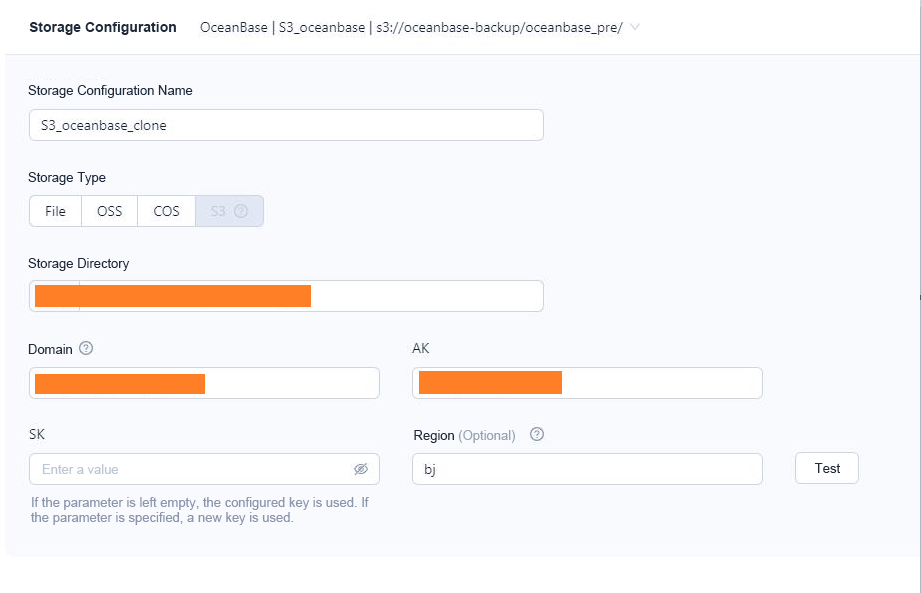
<style>
.page{position:relative;width:921px;height:593px;background:#f9fafe}
.page>*{position:absolute;margin:0}
.t1{font:14px "Arial-BoldMT";color:#1d2a3b}
.t2{font:13px "ArialMT";color:#1d2a3b}
.t3{font:13px "ArialMT";color:#95a4b5}
.t4{font:13px "ArialMT";color:#bcc6d6}
.t5{font:13px/15px "ArialMT";color:#8b95ac}
</style>
<div class="page">
<p class="t1" style="left:29px;top:22px;width:147px;height:13px">Storage Configuration</p>
<p class="t2" style="left:28px;top:85px;width:165px;height:13px">Storage Configuration Name</p>
<p class="t2" style="left:28px;top:172px;width:78px;height:13px">Storage Type</p>
<p class="t2" style="left:28px;top:258px;width:102px;height:13px">Storage Directory</p>
<p class="t2" style="left:28px;top:344px;width:44px;height:10px">Domain</p>
<p class="t3" style="left:414px;top:430px;width:101px;height:13px"><span class="t2">Region </span>(Optional)</p>
<p class="t4" style="left:42px;top:464px;width:76px;height:10px">Enter a value</p>
<p class="t2" style="left:814px;top:463px;width:27px;height:10px">Test</p>
<p class="t5" style="left:31px;top:497px;width:338px;height:28px">If the parameter is left empty, the configured key is used. If the parameter is specified, a new key is used.</p>
</div>
